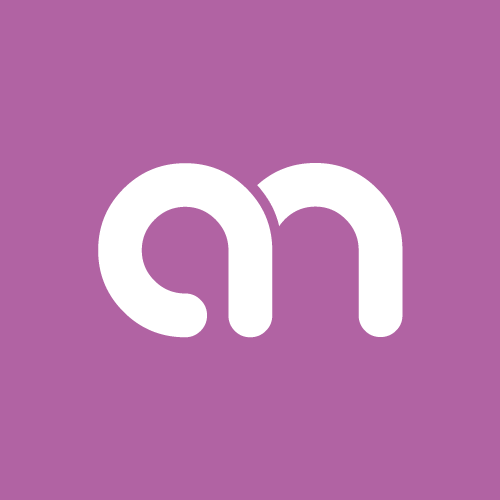
<style>
.page{position:relative;width:500px;height:500px;background:#b163a3}
.page>*{position:absolute;margin:0}
.t1{font:329px "gitchgitch";color:#ffffff;text-transform:uppercase}
</style>
<div class="page">
<p class="t1" style="left:98px;top:163px;width:175px;height:175px">a</p>
<p class="t1" style="left:228px;top:163px;width:175px;height:174px">n</p>
</div>
